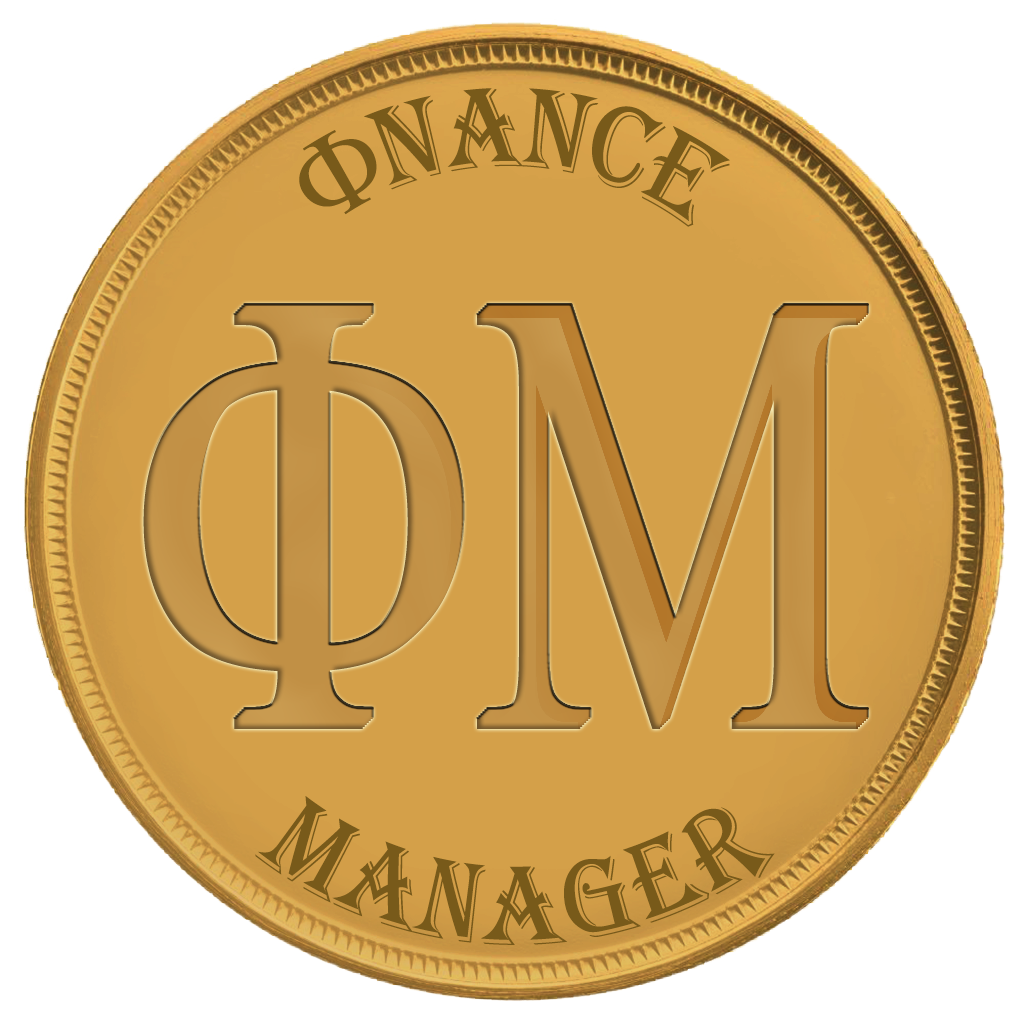
<style>
.page{position:relative;width:1024px;height:1024px;background:#ffffff}
.page>*{position:absolute;margin:0}
.t1{font:116.7px "Algerian";color:#785a1a;scale:0.71 1}
.t2{font:116.7px "SymbolMT";color:#785a1a;scale:0.71 1}
</style>
<div class="page">
<p class="t1" style="left:299px;top:88px;width:431px;height:139px"><span class="t2">F</span>NANCE</p>
<p class="t1" style="left:255px;top:796px;width:520px;height:149px">MANAGER</p>
</div>
